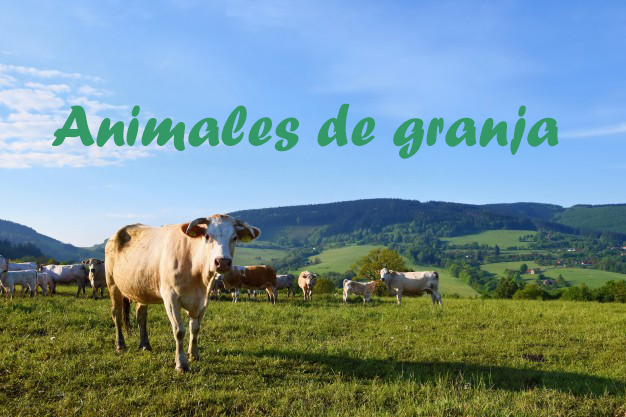
<style>
.page{position:relative;width:626px;height:417px}
.page>*{position:absolute;margin:0}
.t1{font:60px "ForteMT";color:#339966}
</style>
<div class="page">
<p class="t1" style="left:52px;top:103px;width:507px;height:56px">Animales de granja</p>
</div>
